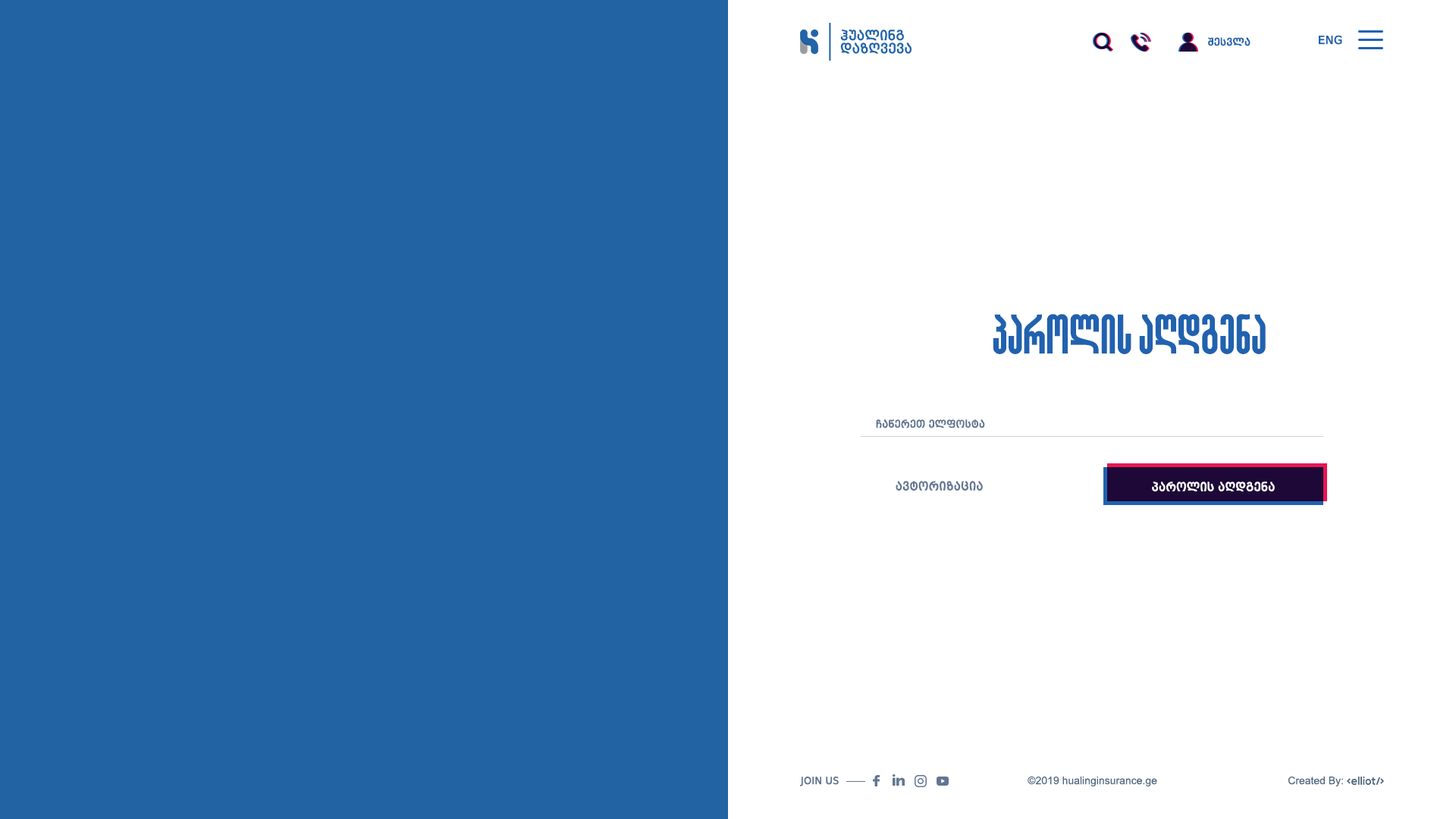
<style>
.page{position:relative;width:1456px;height:819px;background:#2263a4}
.page>*{position:absolute;margin:0}
.t1{font:10.6px "BPGWEB001Caps";color:#2062af}
.t2{font:12.1px "BPGWEB001Caps";color:#2062af;text-transform:uppercase}
.t3{font:54.6px "GLGordeziani-Bold";letter-spacing:-0.025em;color:#2062af}
.t4{font:10.6px "BPGWEB001Caps";color:#617692;text-transform:uppercase}
.t5{font:12.1px "BPGWEB001Caps";color:#617692}
.t6{font:12.1px "BPGWEB001Caps";color:#ffffff}
.t7{font:10.6px "BPGWEB001";color:#617692;text-transform:uppercase}
.t8{font:10.6px "BPGArial2010";color:#516a83}
.t9{font:10.5px "BPGArial2010";color:#516a83}
</style>
<div class="page">
<p class="t1" style="left:1208px;top:37px;width:42px;height:9px">შესვლა</p>
<p class="t2" style="left:1319px;top:35px;width:23px;height:10px">Eng</p>
<p class="t3" style="left:993px;top:314px;width:273px;height:40px">პაროლის აღდგენა</p>
<p class="t4" style="left:876px;top:419px;width:109px;height:9px">ჩაწერეთ ელფოსტა</p>
<p class="t5" style="left:896px;top:481px;width:87px;height:10px">ავტორიზაცია</p>
<p class="t6" style="left:1152px;top:482px;width:123px;height:9px">პაროლის აღდგენა</p>
<p class="t7" style="left:800px;top:777px;width:39px;height:9px">join us</p>
<p class="t8" style="left:1028px;top:776px;width:129px;height:11px">©2019 hualinginsurance.ge</p>
<p class="t9" style="left:1288px;top:776px;width:55px;height:10px">Created By:</p>
</div>
